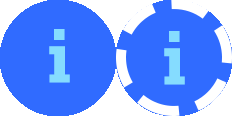
<style>
.page{position:relative;width:233px;height:116px;background:#306bff}
.page>*{position:absolute;margin:0}
.t1{font:80px "ZillaSlab-Bold";color:#85dcff}
</style>
<div class="page">
<p class="t1" style="left:49px;top:29px;width:21px;height:54px">i</p>
<p class="t1" style="left:164px;top:31px;width:21px;height:54px">i</p>
</div>
